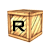
<style>
.page{position:relative;width:50px;height:50px;background:#ffffff}
.page>*{position:absolute;margin:0}
.t1{font:20px "BankGothicBT-Light";color:#000000;font-weight:bold}
</style>
<div class="page">
<p class="t1" style="left:13px;top:20px;width:12px;height:12px">R</p>
</div>
